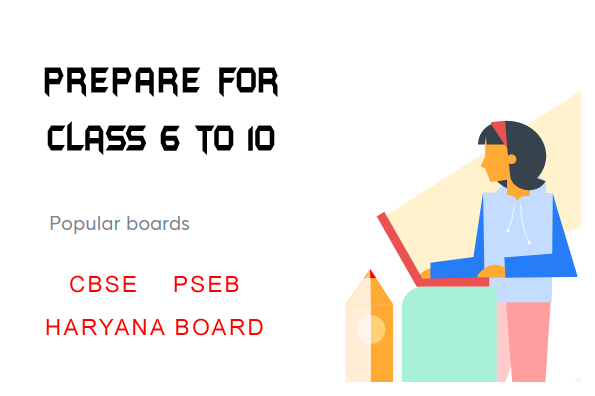
<style>
.page{position:relative;width:595px;height:396px;background:#ffffff}
.page>*{position:absolute;margin:0}
.t1{font:42.5px/59px "BatmanForeverAlternate";color:#000000;scale:0.59 1}
.t2{font:42.5px/59px "BatmanForeverAlternate";letter-spacing:0.08em;color:#000000;scale:0.59 1}
.t3{font:22.5px/42.7px "ArialNarrow";letter-spacing:0.08em;color:#ff0000;scale:1.22 1}
</style>
<div class="page">
<p class="t1" style="left:44px;top:67px;width:234px;height:88px;text-align:center"><span class="t2">prepare </span>for<br>class 6 to 10</p>
<p class="t3" style="left:46px;top:275px;width:217px;height:61px;text-align:center">CBSE    PSEB<br>HARYANA BOARD</p>
</div>
